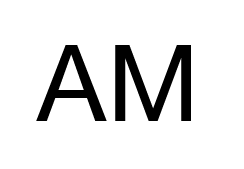
<style>
.page{position:relative;width:244px;height:169px;background:#ffffff}
.page>*{position:absolute;margin:0}
.t1{font:105.6px "HelveticaNeue";letter-spacing:0.01em;color:#000000}
</style>
<div class="page">
<p class="t1" style="left:36px;top:45px;width:155px;height:76px">AM</p>
</div>
